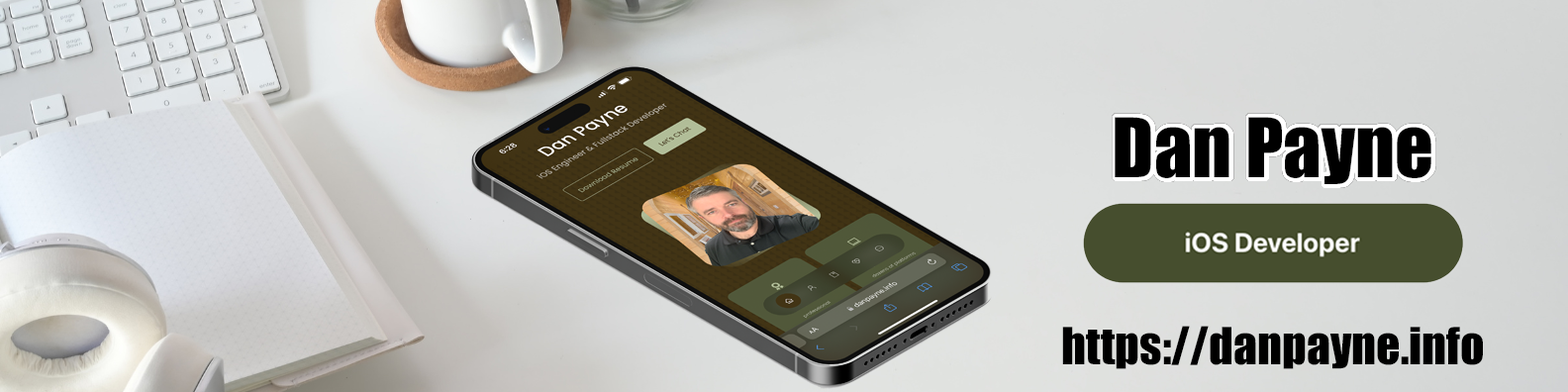
<style>
.page{position:relative;width:1568px;height:392px}
.page>*{position:absolute;margin:0}
.t1{font:75.8px "Impact";color:#000000}
.t2{font:47.3px "Impact";color:#000000}
</style>
<div class="page">
<p class="t1" style="left:1115px;top:117px;width:316px;height:67px">Dan Payne</p>
<p class="t2" style="left:1062px;top:326px;width:421px;height:43px">https://danpayne.info</p>
</div>
